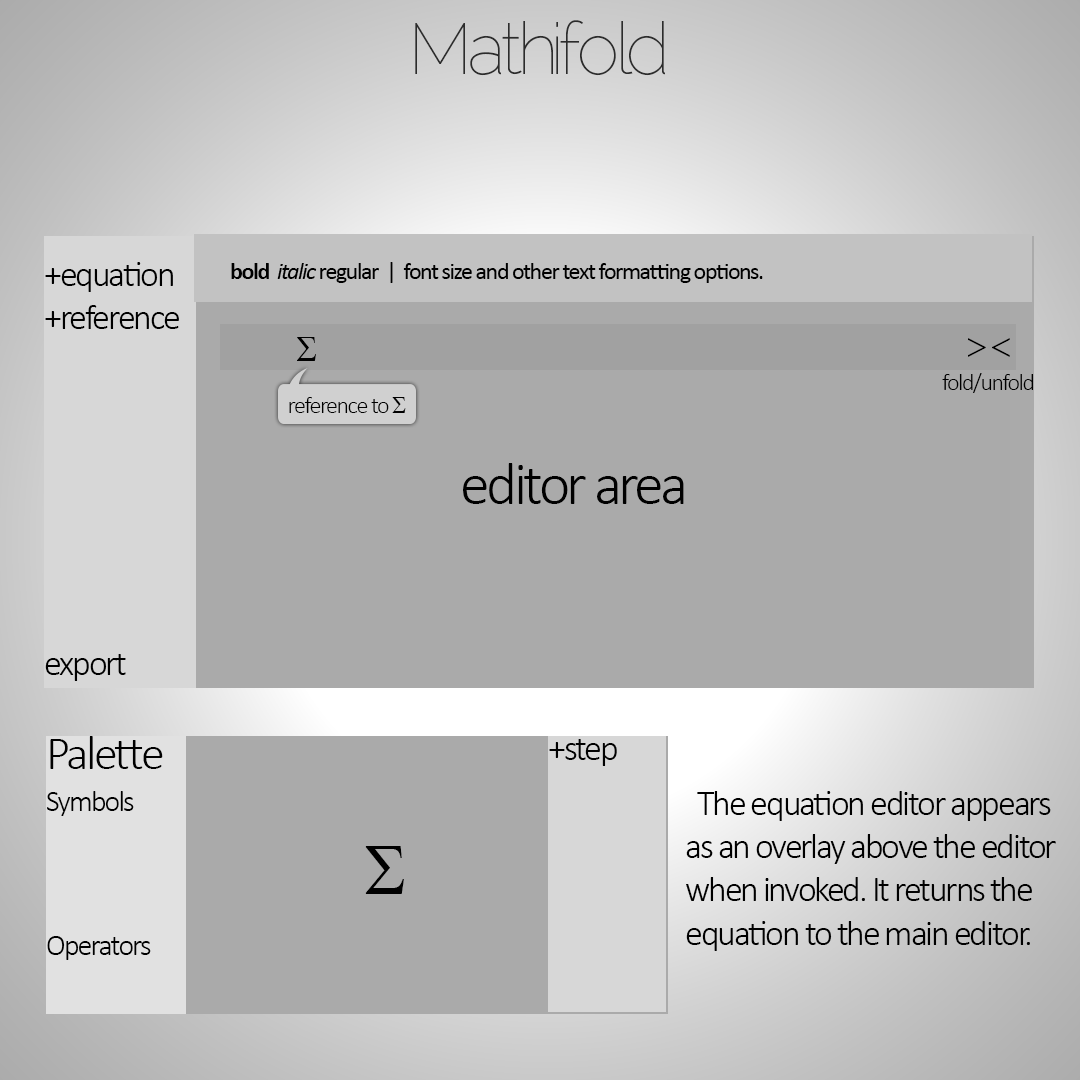
<style>
.page{position:relative;width:1080px;height:1080px;background:#aaaaaa}
.page>*{position:absolute;margin:0}
.t1{font:72px "Raleway-Thin";letter-spacing:-0.06em;color:#2c2c2c}
.t2{font:36px "Calibri-Light";letter-spacing:-0.06em;color:#000000}
.t3{font:24px "Calibri";letter-spacing:-0.06em;color:#000000}
.t4{font:24px "Calibri-Light";letter-spacing:-0.06em;color:#000000}
.t5{font:24px "Calibri-Bold";letter-spacing:-0.06em;color:#000000}
.t6{font:24px "Calibri-Italic";letter-spacing:-0.06em;color:#000000}
.t7{font:24px "SymbolMT";letter-spacing:-0.06em;color:#000000}
.t8{font:60px "Calibri-Light";letter-spacing:-0.06em;color:#000000}
.t9{font:48px "Calibri-Light";letter-spacing:-0.06em;color:#000000}
.t10{font:30px "Calibri-Light";letter-spacing:-0.06em;color:#000000}
.t11{font:72px "Calibri-Light";letter-spacing:-0.06em;color:#000000}
</style>
<div class="page">
<p class="t1" style="left:415px;top:20px;width:250px;height:56px">Mathifold</p>
<p class="t2" style="left:45px;top:262px;width:134px;height:419px">+equation<br>+reference<br><br><br><br><br><br><br><br>export</p>
<p class="t3" style="left:231px;top:262px;width:532px;height:21px"><span class="t4"><br> </span><span class="t5">bold  </span><span class="t6">italic </span>regular  |  font size and other text formatting options.</p>
<p class="t4" style="left:942px;top:373px;width:92px;height:20px">fold/unfold</p>
<p class="t4" style="left:289px;top:397px;width:117px;height:16px">reference to <span class="t7">S</span></p>
<p class="t8" style="left:463px;top:463px;width:221px;height:41px">editor area</p>
<p class="t9" style="left:50px;top:736px;width:113px;height:33px">Palette</p>
<p class="t2" style="left:549px;top:739px;width:68px;height:27px">+step</p>
<p class="t10" style="left:47px;top:791px;width:104px;height:169px">Symbols<br><br><br><br>Operators</p>
<p class="t2" style="left:686px;top:791px;width:370px;height:160px"><span class="t11"> </span>The equation editor appears<br>as an overlay above the editor<br>when invoked. It returns the<br>equation to the main editor.</p>
</div>
